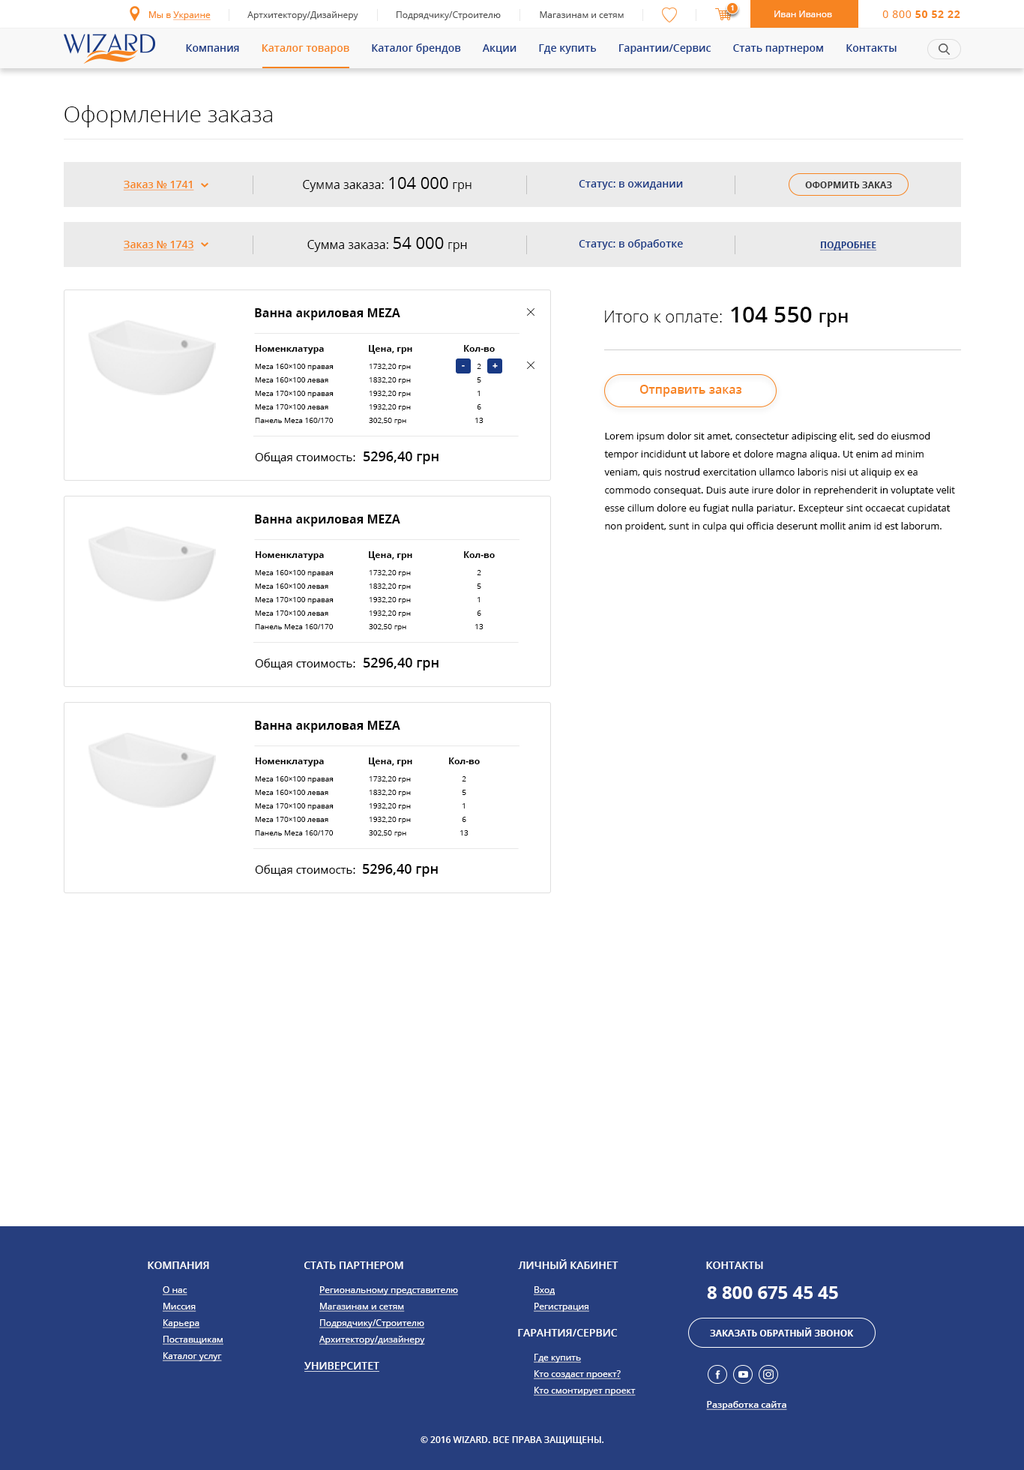
<style>
.page{position:relative;width:1024px;height:1470px;background:#ffffff}
.page>*{position:absolute;margin:0}
.t1{font:7.5px "OpenSans-Semibold";color:#ffffff}
.t2{font:9px "OpenSans";color:#f78421;text-decoration:underline}
.t3{font:9px "OpenSans";color:#f78421}
.t4{font:9px "OpenSans";color:#535353}
.t5{font:9px "OpenSans";color:#ffffff}
.t6{font:10.5px "OpenSans-Bold";letter-spacing:0.05em;color:#f78421}
.t7{font:10.5px "OpenSans";letter-spacing:0.05em;color:#f78421}
.t8{font:10.5px "OpenSans-Semibold";color:#183984}
.t9{font:10.5px "OpenSans-Semibold";color:#f78421}
.t10{font:22.5px "OpenSans-Light";color:#000000}
.t11{font:10.5px "OpenSans-Semibold";color:#f78421;text-decoration:underline}
.t12{font:12px "OpenSans";color:#000000}
.t13{font:16.5px "OpenSans";color:#000000}
.t14{font:9px "OpenSans-Bold";color:#303030;text-transform:uppercase}
.t15{font:9px "OpenSans-Bold";color:#183984;text-transform:uppercase;text-decoration:underline}
.t16{font:12px "OpenSans-Bold";color:#000000}
.t17{font:16.5px "OpenSans-Light";color:#000000}
.t18{font:22.5px "OpenSans-Semibold";color:#000000}
.t19{font:18px "OpenSans-Semibold";color:#000000}
.t20{font:9px "OpenSans-Bold";color:#000000}
.t21{font:7.5px/13.5px "OpenSans";color:#000000}
.t22{font:9px "OpenSans-Bold";color:#ffffff}
.t23{font:12px "OpenSans-Semibold";color:#f78421}
.t24{font:9.8px/18px "OpenSans";color:#000000}
.t25{font:11.2px "OpenSans";color:#000000}
.t26{font:13.5px "OpenSans-Semibold";color:#000000}
.t27{font:10.5px "OpenSans-Semibold";color:#ffffff;text-transform:uppercase}
.t28{font:9px/16.5px "OpenSans";color:#ffffff;text-decoration:underline}
.t29{font:18px "OpenSans-Bold";color:#ffffff}
.t30{font:9px "OpenSans-Bold";color:#ffffff;text-transform:uppercase}
.t31{font:10.5px "OpenSans-Semibold";color:#ffffff;text-transform:uppercase;text-decoration:underline}
.t32{font:9px "OpenSans-Semibold";color:#ffffff;text-decoration:underline}
.t33{font:9px "OpenSans-Semibold";color:#ffffff;text-transform:uppercase}
</style>
<div class="page">
<p class="t1" style="left:731px;top:5px;width:3px;height:5px">1</p>
<p class="t2" style="left:149px;top:11px;width:62px;height:9px"><span class="t3">Мы в </span>Украине</p>
<p class="t4" style="left:248px;top:11px;width:110px;height:9px">Артхитектору/Дизайнеру</p>
<p class="t4" style="left:397px;top:11px;width:104px;height:9px">Подрядчику/Строителю</p>
<p class="t4" style="left:540px;top:11px;width:84px;height:7px">Магазинам и сетям</p>
<p class="t5" style="left:775px;top:10px;width:57px;height:7px">Иван Иванов</p>
<p class="t6" style="left:883px;top:10px;width:78px;height:8px"><span class="t7">0 800 </span>50 52 22</p>
<p class="t8" style="left:186px;top:44px;width:711px;height:10px">Компания<span class="t9">        Каталог товаров</span>        Каталог брендов        Акции        Где купить        Гарантии/Сервис        Стать партнером        Контакты</p>
<p class="t10" style="left:64px;top:105px;width:208px;height:23px">Оформление заказа</p>
<p class="t11" style="left:123px;top:181px;width:71px;height:9px">Заказ № 1741</p>
<p class="t12" style="left:303px;top:177px;width:169px;height:15px">Сумма заказа: <span class="t13">104 000 </span>грн</p>
<p class="t8" style="left:579px;top:180px;width:104px;height:10px">Статус: в ожидании</p>
<p class="t14" style="left:806px;top:182px;width:86px;height:6px">оформить заказ</p>
<p class="t11" style="left:123px;top:241px;width:71px;height:9px">Заказ № 1743</p>
<p class="t12" style="left:308px;top:237px;width:159px;height:15px">Сумма заказа: <span class="t13">54 000 </span>грн</p>
<p class="t8" style="left:579px;top:239px;width:104px;height:11px">Статус: в обработке</p>
<p class="t15" style="left:820px;top:242px;width:58px;height:8px">Подробнее</p>
<p class="t16" style="left:255px;top:308px;width:145px;height:12px">Ванна акриловая MEZA</p>
<p class="t17" style="left:605px;top:310px;width:117px;height:12px">Итого к оплате:</p>
<p class="t18" style="left:731px;top:307px;width:117px;height:20px">104 550 <span class="t19">грн</span></p>
<p class="t20" style="left:256px;top:345px;width:68px;height:9px">Номенклатура</p>
<p class="t20" style="left:369px;top:345px;width:43px;height:9px">Цена, грн</p>
<p class="t20" style="left:464px;top:345px;width:31px;height:7px">Кол-во</p>
<p class="t21" style="left:255px;top:364px;width:79px;height:59px">Meza 160×100 правая<br>Meza 160×100 левая<br>Meza 170×100 правая<br>Meza 170×100 левая<br>Панель Meza 160/170</p>
<p class="t21" style="left:369px;top:364px;width:42px;height:60px">1732,20 грн<br>1832,20 грн<br>1932,20 грн<br>1932,20 грн<br>302,50 грн</p>
<p class="t22" style="left:462px;top:365px;width:3px;height:2px">-</p>
<p class="t21" style="left:476px;top:364px;width:8px;height:59px;text-align:center">2<br>5<br>1<br>6<br>13</p>
<p class="t22" style="left:493px;top:363px;width:5px;height:5px">+</p>
<p class="t23" style="left:640px;top:385px;width:102px;height:12px">Отправить заказ</p>
<p class="t24" style="left:604px;top:432px;width:352px;height:100px">Lorem ipsum dolor sit amet, consectetur adipiscing elit, sed do eiusmod tempor incididunt ut labore et dolore magna aliqua. Ut enim ad minim veniam, quis nostrud exercitation ullamco laboris nisi ut aliquip ex ea commodo consequat. Duis aute irure dolor in reprehenderit in voluptate velit esse cillum dolore eu fugiat nulla pariatur. Excepteur sint occaecat cupidatat non proident, sunt in culpa qui officia deserunt mollit anim id est laborum.</p>
<p class="t25" style="left:255px;top:452px;width:101px;height:12px">Общая стоимость:</p>
<p class="t26" style="left:363px;top:452px;width:76px;height:12px">5296,40 грн</p>
<p class="t16" style="left:255px;top:514px;width:145px;height:12px">Ванна акриловая MEZA</p>
<p class="t20" style="left:256px;top:551px;width:68px;height:9px">Номенклатура</p>
<p class="t20" style="left:369px;top:551px;width:43px;height:9px">Цена, грн</p>
<p class="t20" style="left:464px;top:551px;width:31px;height:7px">Кол-во</p>
<p class="t21" style="left:255px;top:570px;width:79px;height:59px">Meza 160×100 правая<br>Meza 160×100 левая<br>Meza 170×100 правая<br>Meza 170×100 левая<br>Панель Meza 160/170</p>
<p class="t21" style="left:369px;top:570px;width:42px;height:61px">1732,20 грн<br>1832,20 грн<br>1932,20 грн<br>1932,20 грн<br>302,50 грн</p>
<p class="t21" style="left:476px;top:570px;width:8px;height:59px;text-align:center">2<br>5<br>1<br>6<br>13</p>
<p class="t25" style="left:255px;top:658px;width:101px;height:12px">Общая стоимость:</p>
<p class="t26" style="left:363px;top:658px;width:76px;height:12px">5296,40 грн</p>
<p class="t16" style="left:255px;top:721px;width:145px;height:12px">Ванна акриловая MEZA</p>
<p class="t20" style="left:256px;top:758px;width:68px;height:8px">Номенклатура</p>
<p class="t20" style="left:369px;top:758px;width:43px;height:8px">Цена, грн</p>
<p class="t20" style="left:449px;top:758px;width:31px;height:6px">Кол-во</p>
<p class="t21" style="left:255px;top:776px;width:79px;height:60px">Meza 160×100 правая<br>Meza 160×100 левая<br>Meza 170×100 правая<br>Meza 170×100 левая<br>Панель Meza 160/170</p>
<p class="t21" style="left:369px;top:776px;width:42px;height:61px">1732,20 грн<br>1832,20 грн<br>1932,20 грн<br>1932,20 грн<br>302,50 грн</p>
<p class="t21" style="left:460px;top:776px;width:9px;height:60px;text-align:center">2<br>5<br>1<br>6<br>13</p>
<p class="t25" style="left:255px;top:865px;width:101px;height:11px">Общая стоимость:</p>
<p class="t26" style="left:362px;top:864px;width:76px;height:13px">5296,40 грн</p>
<p class="t27" style="left:148px;top:1262px;width:61px;height:7px">Компания</p>
<p class="t27" style="left:304px;top:1262px;width:100px;height:7px">СТАТЬ ПАРТНЕРОМ</p>
<p class="t27" style="left:518px;top:1259px;width:101px;height:10px">ЛИЧНЫЙ КАБИНЕТ</p>
<p class="t27" style="left:706px;top:1262px;width:58px;height:7px">Контакты</p>
<p class="t28" style="left:163px;top:1286px;width:61px;height:75px">О нас<br>Миссия<br>Карьера<br>Поставщикам<br>Каталог услуг</p>
<p class="t28" style="left:320px;top:1286px;width:138px;height:59px">Региональному представителю<br>Магазинам и сетям<br>Подрядчику/Строителю<br>Архитектору/дизайнеру</p>
<p class="t28" style="left:534px;top:1286px;width:56px;height:26px">Вход<br>Регистрация</p>
<p class="t29" style="left:707px;top:1286px;width:131px;height:13px">8 800 675 45 45</p>
<p class="t27" style="left:518px;top:1329px;width:99px;height:7px">ГАРАНТИЯ/СЕРВИС</p>
<p class="t30" style="left:710px;top:1328px;width:144px;height:8px">Заказать обратный звонок</p>
<p class="t28" style="left:534px;top:1354px;width:102px;height:42px">Где купить<br>Кто создаст проект?<br>Кто смонтирует проект</p>
<p class="t31" style="left:304px;top:1362px;width:76px;height:10px">Университет</p>
<p class="t32" style="left:706px;top:1401px;width:82px;height:9px">Разработка сайта</p>
<p class="t33" style="left:421px;top:1436px;width:183px;height:8px">© 2016 WIZArd. Все права защищены.</p>
</div>
